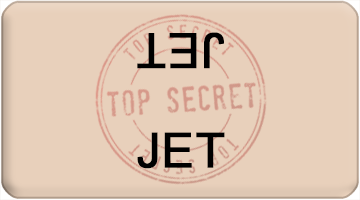
<style>
.page{position:relative;width:360px;height:200px;background:#e8d0bb}
.page>*{position:absolute;margin:0}
.t1{font:48px "ArialMT";color:#000000;font-weight:bold}
</style>
<div class="page">
<p class="t1" style="left:137px;top:32px;width:87px;height:37px;rotate:180deg">JET</p>
<p class="t1" style="left:137px;top:132px;width:88px;height:37px">JET</p>
</div>
